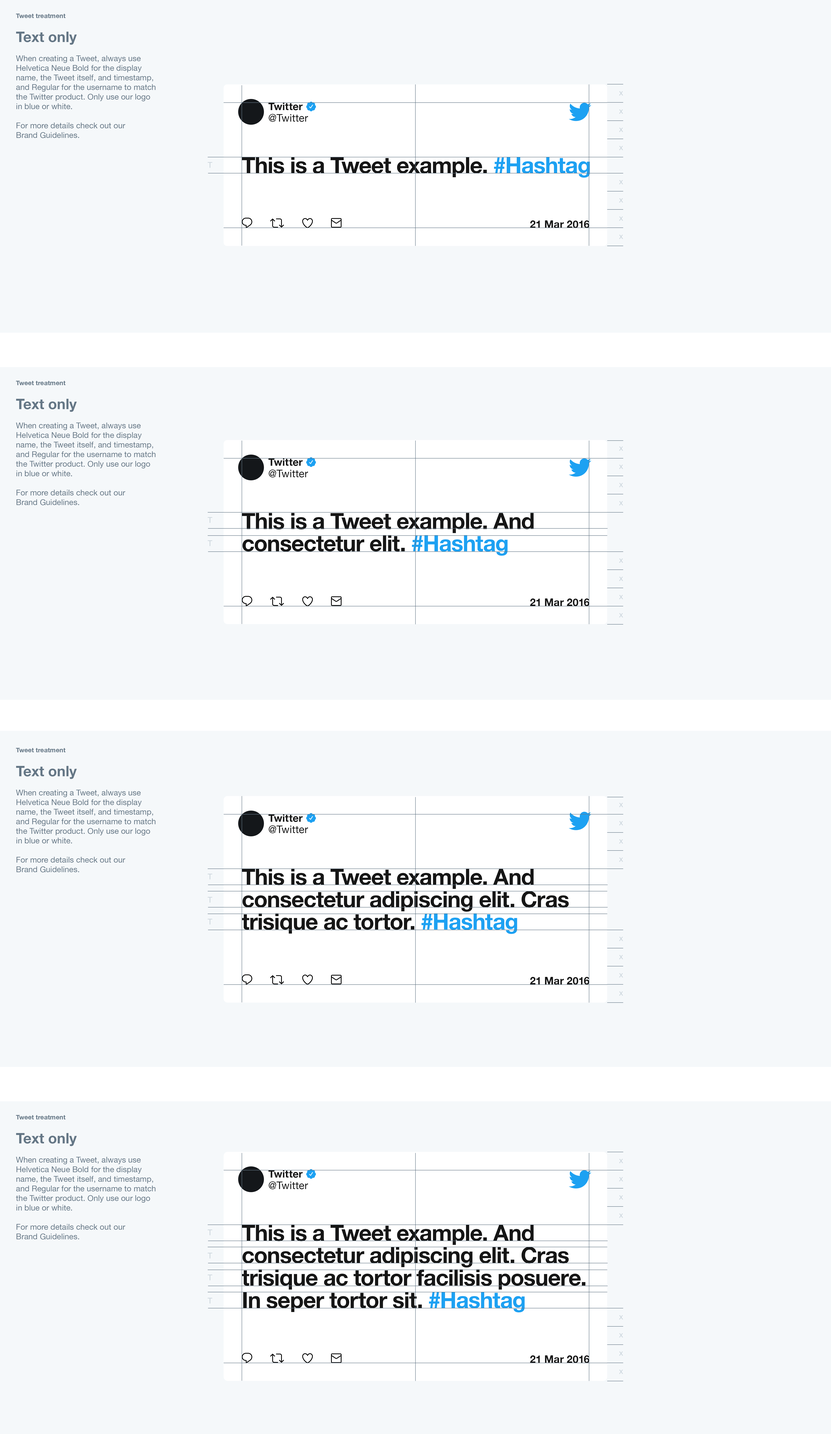
<style>
.page{position:relative;width:831px;height:1434px;background:#f5f8fa}
.page>*{position:absolute;margin:0}
.t1{font:8px "HelveticaNeue";color:#657786}
.t2{font:6.4px/14.4px "HelveticaNeue-Bold";color:#657786}
.t3{font:14.4px/14.4px "HelveticaNeue-Bold";color:#657786}
.t4{font:10.4px "HelveticaNeue-Bold";color:#161616}
.t5{font:10.4px "HelveticaNeue";letter-spacing:0.015em;color:#161616}
.t6{font:22.4px "HelveticaNeue-Bold";letter-spacing:-0.025em;color:#161616}
.t7{font:22.4px "HelveticaNeue-Bold";letter-spacing:-0.025em;color:#1da1f2}
.t8{font:22.4px/22.4px "HelveticaNeue-Bold";letter-spacing:-0.025em;color:#161616}
.t9{font:22.4px/22.4px "HelveticaNeue-Bold";letter-spacing:-0.025em;color:#1da1f2}
</style>
<div class="page">
<p class="t1" style="left:16px;top:14px;width:140px;height:124px"><span class="t2">Tweet treatment<br><br></span><span class="t3">Text only<br></span><br>When creating a Tweet, always use Helvetica Neue Bold for the display name, the Tweet itself, and timestamp, and Regular for the username to match the Twitter product. Only use our logo in blue or white. <br><br>For more details check out our<br>Brand Guidelines.</p>
<p class="t4" style="left:268px;top:103px;width:35px;height:7px">Twitter</p>
<p class="t5" style="left:269px;top:114px;width:39px;height:8px">@Twitter</p>
<p class="t6" style="left:242px;top:157px;width:348px;height:21px">This is a Tweet example. <span class="t7">#Hashtag</span></p>
<p class="t4" style="left:530px;top:220px;width:60px;height:8px">21 Mar 2016</p>
<p class="t1" style="left:16px;top:381px;width:140px;height:124px"><span class="t2">Tweet treatment<br><br></span><span class="t3">Text only<br></span><br>When creating a Tweet, always use Helvetica Neue Bold for the display name, the Tweet itself, and timestamp, and Regular for the username to match the Twitter product. Only use our logo in blue or white. <br><br>For more details check out our<br>Brand Guidelines.</p>
<p class="t4" style="left:268px;top:459px;width:35px;height:7px">Twitter</p>
<p class="t5" style="left:269px;top:470px;width:39px;height:8px">@Twitter</p>
<p class="t8" style="left:242px;top:513px;width:292px;height:43px">This is a Tweet example. And<br>consectetur elit. <span class="t9">#Hashtag</span></p>
<p class="t4" style="left:530px;top:599px;width:60px;height:7px">21 Mar 2016</p>
<p class="t1" style="left:16px;top:748px;width:140px;height:125px"><span class="t2">Tweet treatment<br><br></span><span class="t3">Text only<br></span><br>When creating a Tweet, always use Helvetica Neue Bold for the display name, the Tweet itself, and timestamp, and Regular for the username to match the Twitter product. Only use our logo in blue or white. <br><br>For more details check out our<br>Brand Guidelines.</p>
<p class="t4" style="left:268px;top:815px;width:35px;height:7px">Twitter</p>
<p class="t5" style="left:269px;top:826px;width:39px;height:7px">@Twitter</p>
<p class="t8" style="left:242px;top:869px;width:327px;height:65px">This is a Tweet example. And<br>consectetur adipiscing elit. Cras <br>trisique ac tortor. <span class="t9">#Hashtag</span></p>
<p class="t4" style="left:530px;top:977px;width:60px;height:8px">21 Mar 2016</p>
<p class="t1" style="left:16px;top:1115px;width:140px;height:125px"><span class="t2">Tweet treatment<br><br></span><span class="t3">Text only<br></span><br>When creating a Tweet, always use Helvetica Neue Bold for the display name, the Tweet itself, and timestamp, and Regular for the username to match the Twitter product. Only use our logo in blue or white. <br><br>For more details check out our<br>Brand Guidelines.</p>
<p class="t4" style="left:268px;top:1171px;width:35px;height:7px">Twitter</p>
<p class="t5" style="left:269px;top:1182px;width:39px;height:8px">@Twitter</p>
<p class="t8" style="left:242px;top:1225px;width:344px;height:88px">This is a Tweet example. And<br>consectetur adipiscing elit. Cras <br>trisique ac tortor facilisis posuere.<br>In seper tortor sit. <span class="t9">#Hashtag</span></p>
<p class="t4" style="left:530px;top:1356px;width:60px;height:7px">21 Mar 2016</p>
</div>
